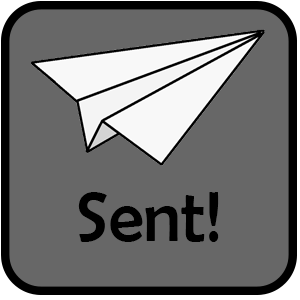
<style>
.page{position:relative;width:300px;height:300px;background:#676767}
.page>*{position:absolute;margin:0}
.t1{font:72px "BerlinSansFB-Reg";color:#000000}
</style>
<div class="page">
<p class="t1" style="left:78px;top:192px;width:141px;height:50px">Sent!</p>
</div>
